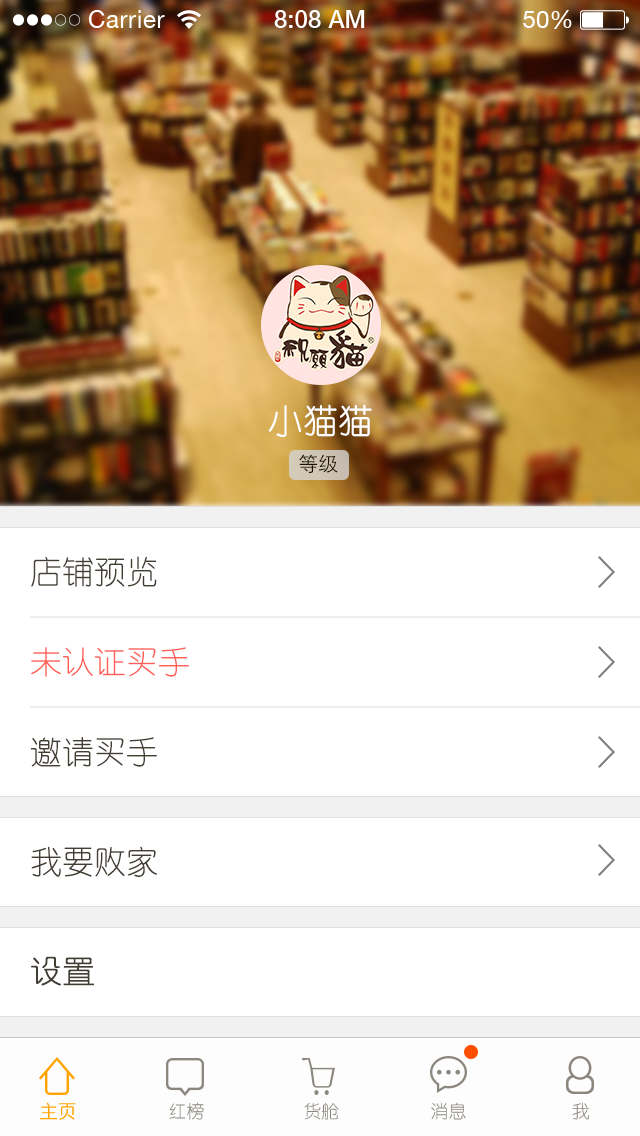
<style>
.page{position:relative;width:640px;height:1136px;background:#ffffff}
.page>*{position:absolute;margin:0}
.t1{font:34px "YouYuan";color:#ffffff;font-weight:bold}
.t2{font:20px "STHeitiSC-Light";color:#1b1100;text-transform:uppercase}
.t3{font:32px "YouYuan";color:#433e34}
.t4{font:32px "YouYuan";color:#ff5f57}
.t5{font:32px "YouYuan";color:#433e34;font-weight:bold}
.t6{font:18px "YouYuan";color:#ffa300;font-weight:bold}
.t7{font:18px "YouYuan";color:#8c877e;text-transform:uppercase}
.t8{font:18px "YouYuan";text-transform:uppercase}
</style>
<div class="page">
<p class="t1" style="left:268px;top:404px;width:104px;height:33px">小猫猫</p>
<p class="t2" style="left:299px;top:454px;width:39px;height:19px">等级</p>
<p class="t3" style="left:31px;top:556px;width:126px;height:31px">店铺预览</p>
<p class="t4" style="left:31px;top:647px;width:158px;height:30px">未认证买手</p>
<p class="t3" style="left:30px;top:737px;width:127px;height:30px">邀请买手</p>
<p class="t3" style="left:31px;top:846px;width:126px;height:31px">我要败家</p>
<p class="t5" style="left:31px;top:956px;width:63px;height:30px">设置</p>
<p class="t6" style="left:40px;top:1102px;width:36px;height:18px">主页</p>
<p class="t7" style="left:169px;top:1102px;width:35px;height:18px">红榜</p>
<p class="t7" style="left:304px;top:1102px;width:35px;height:18px">货舱</p>
<p class="t8" style="left:431px;top:1102px;width:35px;height:18px">消息</p>
<p class="t7" style="left:572px;top:1102px;width:17px;height:18px">我</p>
</div>
